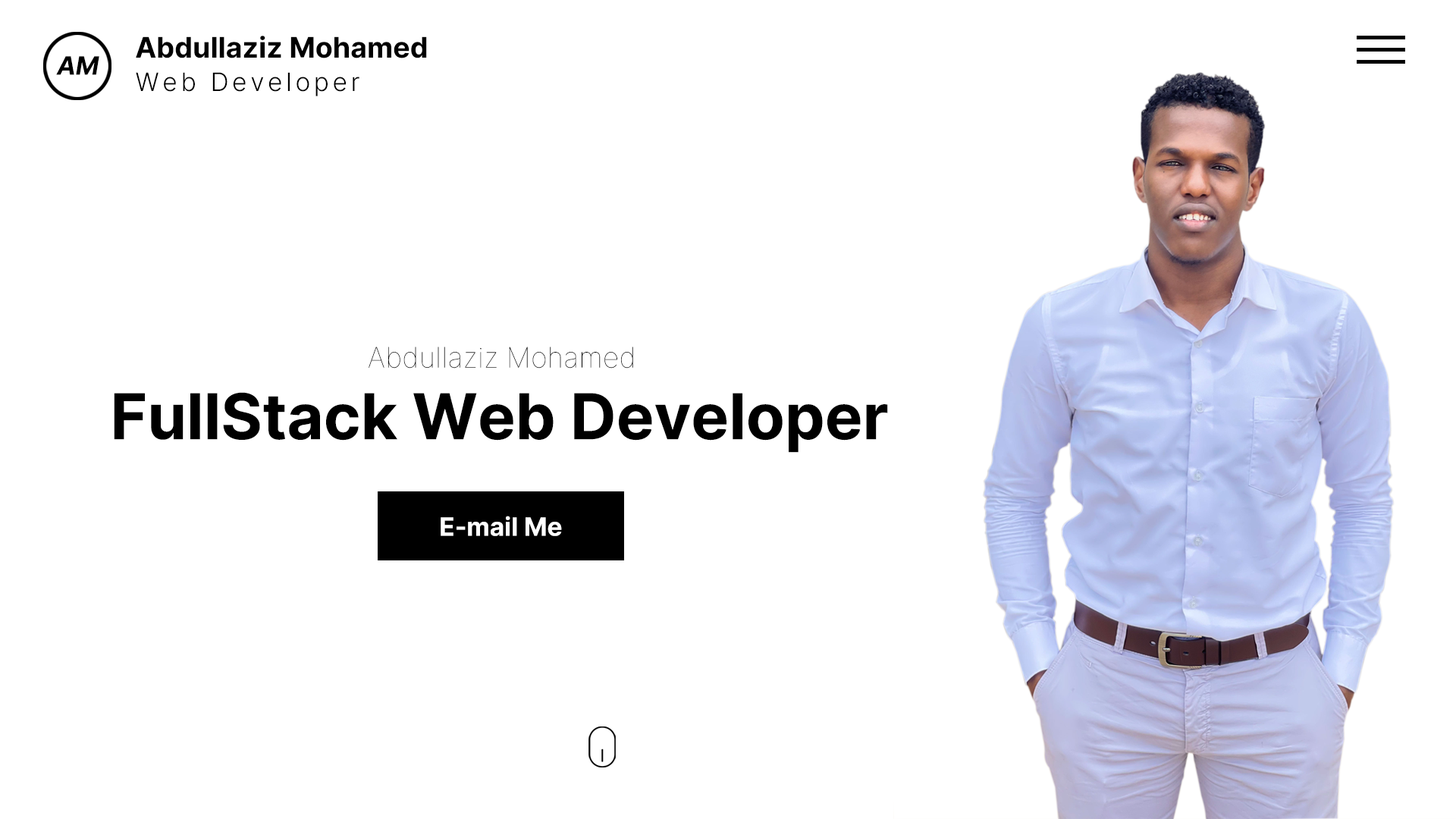
<style>
.page{position:relative;width:1456px;height:819px;background:#ffffff}
.page>*{position:absolute;margin:0}
.t1{font:28.5px "Inter-Bold";color:#000000}
.t2{font:25.3px "Inter-BoldItalic";color:#000000}
.t3{font:25.3px "Inter-Light";letter-spacing:0.14em;color:#000000}
.t4{font:28.5px "Inter-Thin";color:#000000}
.t5{font:63.2px "Inter-Bold";color:#000000}
</style>
<div class="page">
<p class="t1" style="left:136px;top:36px;width:291px;height:22px">Abdullaziz Mohamed</p>
<p class="t2" style="left:56px;top:56px;width:43px;height:19px">AM</p>
<p class="t3" style="left:136px;top:72px;width:223px;height:24px">Web Developer</p>
<p class="t4" style="left:369px;top:347px;width:264px;height:22px">Abdullaziz Mohamed</p>
<p class="t5" style="left:114px;top:392px;width:774px;height:61px">FullStack Web Developer</p>
</div>
